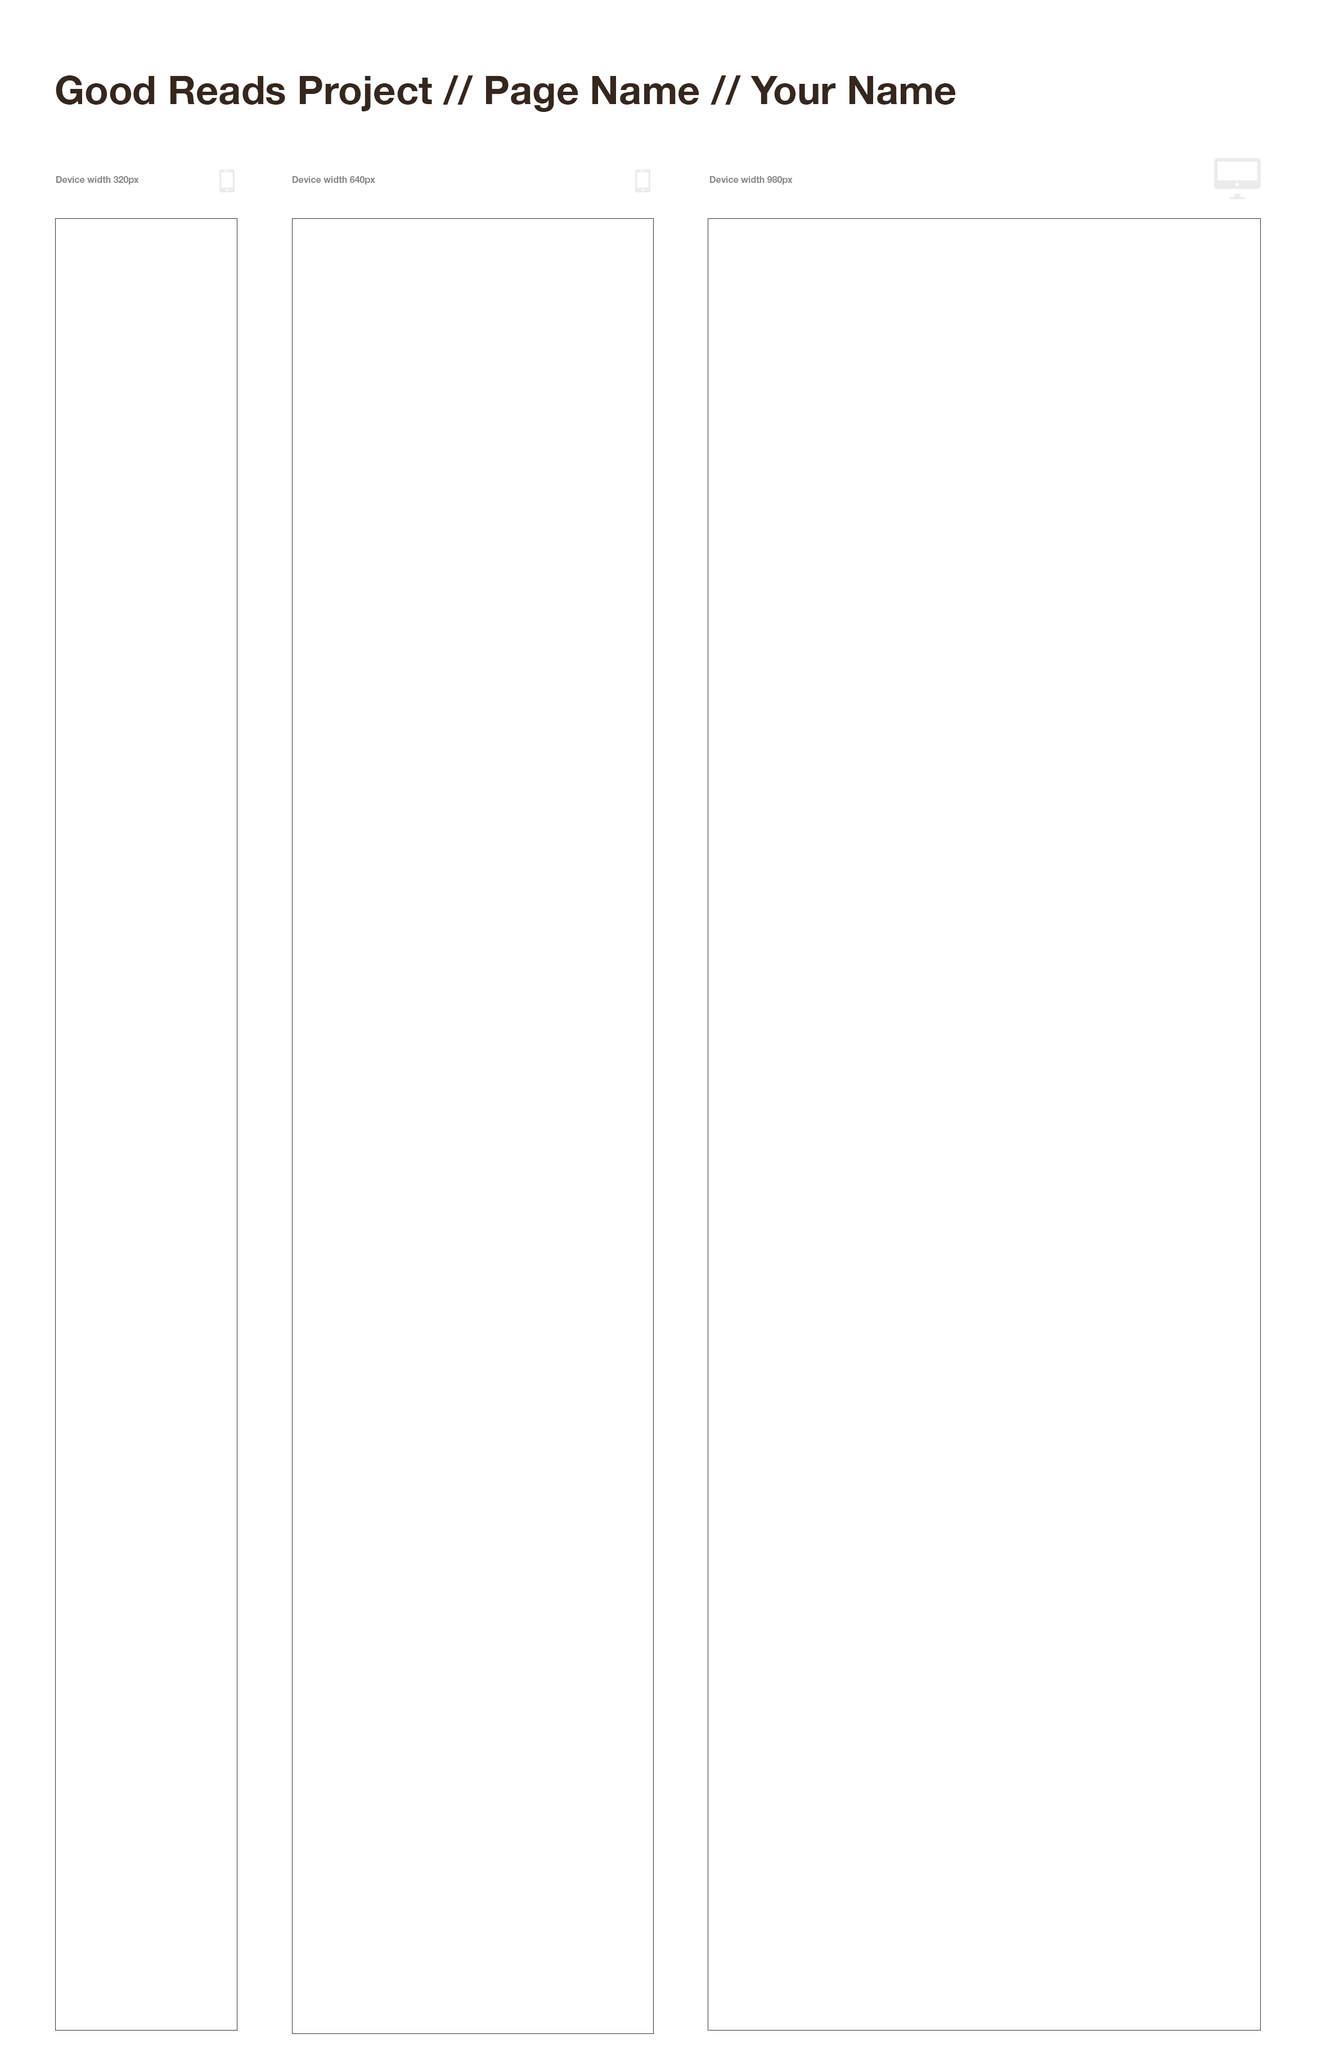
<style>
.page{position:relative;width:1317px;height:2066px;background:#ffffff}
.page>*{position:absolute;margin:0}
.t1{font:39.4px "HelveticaNeue-Bold";color:#35271e}
.t2{font:9px "HelveticaNeueLTStd-Bd";color:#878787}
</style>
<div class="page">
<p class="t1" style="left:56px;top:75px;width:900px;height:37px">Good Reads Project // Page Name // Your Name</p>
<p class="t2" style="left:56px;top:176px;width:83px;height:8px">Device width 320px</p>
<p class="t2" style="left:292px;top:176px;width:83px;height:8px">Device width 640px</p>
<p class="t2" style="left:710px;top:176px;width:83px;height:8px">Device width 980px</p>
</div>
